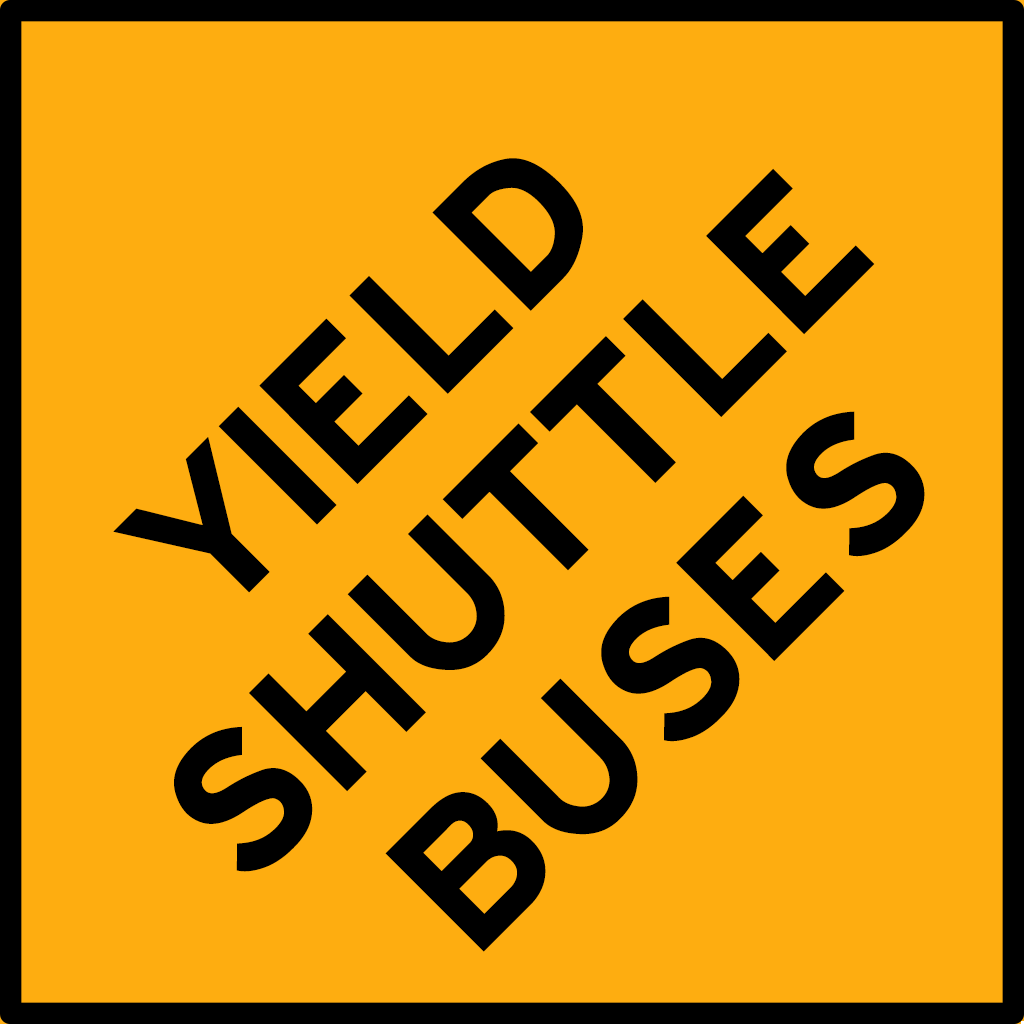
<style>
.page{position:relative;width:1024px;height:1024px;background:#fead10}
.page>*{position:absolute;margin:0}
.t1{font:210px/210px "HittheRoad";color:#000000}
</style>
<div class="page">
<p class="t1" style="left:113px;top:158px;width:812px;height:794px;text-align:center;rotate:-45deg">YIELD<br>SHUTTLE<br>BUSES</p>
</div>
